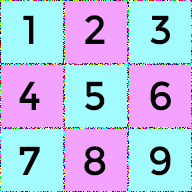
<style>
.page{position:relative;width:192px;height:192px;background:#a2fcff}
.page>*{position:absolute;margin:0}
.t1{font:40.4px "Montserrat-Regular";color:#000000}
</style>
<div class="page">
<p class="t1" style="left:23px;top:15px;width:11px;height:29px">1</p>
<p class="t1" style="left:85px;top:15px;width:20px;height:29px">2</p>
<p class="t1" style="left:150px;top:15px;width:20px;height:30px">3</p>
<p class="t1" style="left:19px;top:81px;width:21px;height:29px">4</p>
<p class="t1" style="left:85px;top:81px;width:20px;height:30px">5</p>
<p class="t1" style="left:150px;top:81px;width:21px;height:30px">6</p>
<p class="t1" style="left:19px;top:146px;width:21px;height:29px">7</p>
<p class="t1" style="left:84px;top:146px;width:22px;height:30px">8</p>
<p class="t1" style="left:150px;top:146px;width:21px;height:30px">9</p>
</div>
